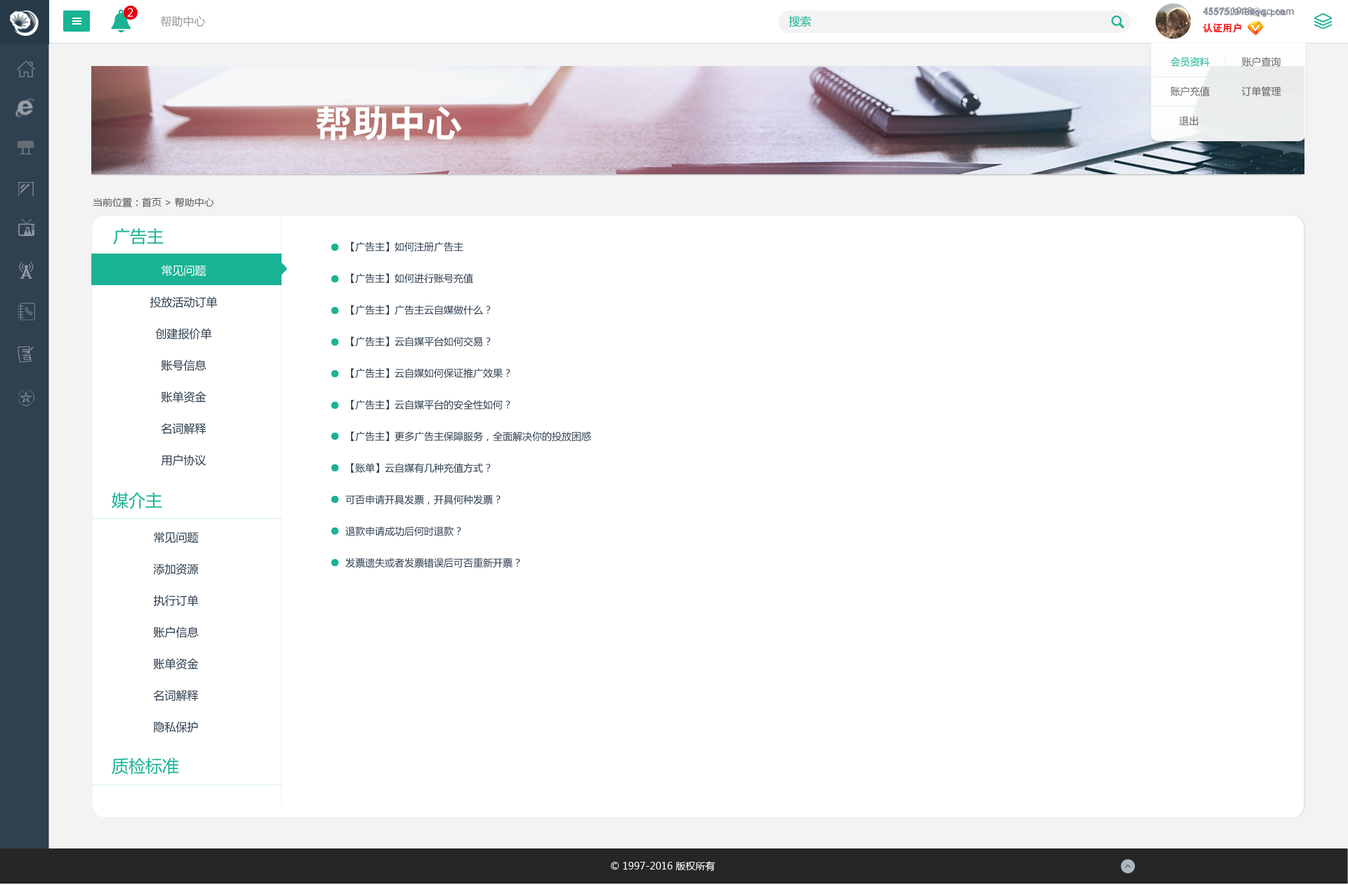
<style>
.page{position:relative;width:1348px;height:885px;background:#ffffff}
.page>*{position:absolute;margin:0}
.t1{font:11.2px "MicrosoftYaHei";color:#ffffff}
.t2{font:11.2px "MicrosoftYaHei";color:#999999}
.t3{font:11.2px "MicrosoftYaHei";color:#1ab394}
.t4{font:9.8px/16.8px "AdobeHeitiStd-Regular";color:#999999}
.t5{font:9.8px/16.8px "AdobeHeitiStd-Regular";color:#f61e1e}
.t6{font:9.8px/16.8px "AdobeHeitiStd-Regular";color:#ffffff}
.t7{font:9.8px/16.8px "SimSun";color:#8894a4;font-weight:bold}
.t8{font:9.8px/16.8px "SimSun";color:#f61e1e}
.t9{font:9.8px/29.5px "MicrosoftYaHei";color:#666666}
.t10{font:9.8px/29.5px "MicrosoftYaHei";color:#1ab394}
.t11{font:9.8px "MicrosoftYaHei";color:#666666}
.t12{font:16.8px "MicrosoftYaHei";color:#1ab394}
.t13{font:9.8px/31.6px "MicrosoftYaHei";color:#2f4050}
.t14{font:11.2px/31.6px "MicrosoftYaHei";color:#2f4050}
.t15{font:11.2px/31.6px "MicrosoftYaHei";color:#ffffff}
.t16{font:9.8px "MicrosoftYaHei";color:#ffffff}
</style>
<div class="page">
<p class="t1" style="left:127px;top:8px;width:6px;height:9px">2</p>
<p class="t2" style="left:161px;top:15px;width:45px;height:12px">帮助中心</p>
<p class="t3" style="left:788px;top:15px;width:24px;height:12px">搜索</p>
<p class="t4" style="left:1203px;top:7px;width:91px;height:26px">455751948@qq.com<br><span class="t5">认证用户               </span><span class="t6">退出</span></p>
<p class="t7" style="left:1203px;top:8px;width:83px;height:25px">455751948@qq.com<br><span class="t8">认证用户</span></p>
<p class="t9" style="left:1170px;top:57px;width:111px;height:69px"><span class="t10">会员资料</span>           账户查询<br>账户充值           订单管理           <br>   退出</p>
<p class="t11" style="left:93px;top:197px;width:121px;height:11px">当前位置：首页 &gt; 帮助中心</p>
<p class="t12" style="left:113px;top:227px;width:51px;height:17px">广告主</p>
<p class="t13" style="left:345px;top:242px;width:246px;height:326px">【广告主】如何注册广告主<br>【广告主】如何进行账号充值<br>【广告主】广告主云自媒做什么？<br>【广告主】云自媒平台如何交易？<br>【广告主】云自媒如何保证推广效果？<br>【广告主】云自媒平台的安全性如何？<br>【广告主】更多广告主保障服务，全面解决你的投放困惑<br>【账单】云自媒有几种充值方式？<br>可否申请开具发票，开具何种发票？<br>退款申请成功后何时退款？<br>发票遗失或者发票错误后可否重新开票？</p>
<p class="t14" style="left:150px;top:265px;width:68px;height:200px;text-align:center"><span class="t15">常见问题<br></span>投放活动订单<br>创建报价单<br>账号信息<br>账单资金<br>名词解释<br>用户协议<br>内容审核标准</p>
<p class="t12" style="left:112px;top:492px;width:50px;height:17px">媒介主</p>
<p class="t14" style="left:153px;top:531px;width:46px;height:201px">常见问题<br>添加资源<br>执行订单<br>账户信息<br>账单资金<br>名词解释<br>隐私保护<br>用户协议</p>
<p class="t12" style="left:112px;top:757px;width:67px;height:17px">质检标准</p>
<p class="t16" style="left:611px;top:861px;width:104px;height:10px">© 1997-2016 版权所有</p>
</div>
